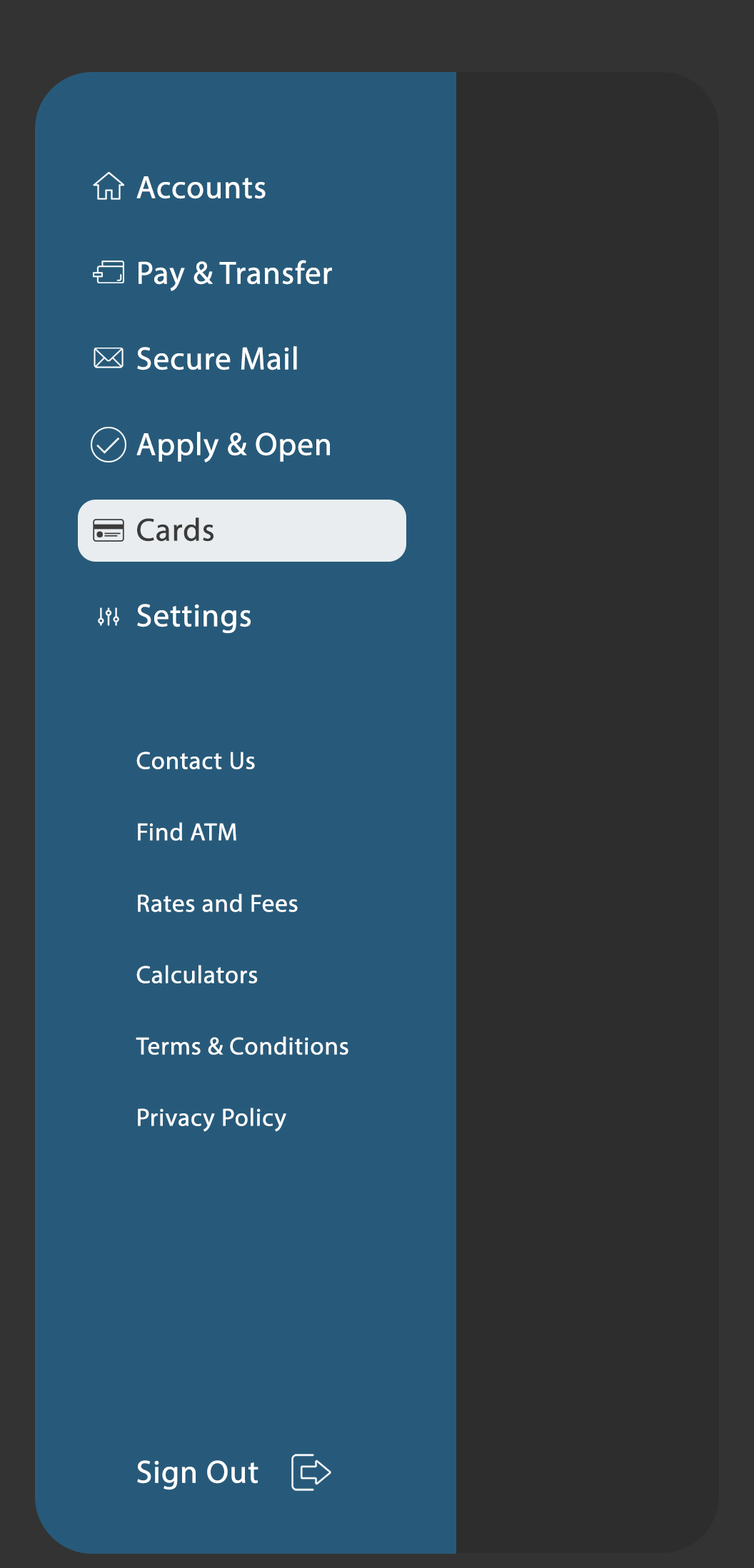
<style>
.page{position:relative;width:754px;height:1568px;background:#275a7a}
.page>*{position:absolute;margin:0}
.t1{font:25px/71.4px "MyriadPro-Regular";color:#ffffff;font-weight:bold}
.t2{font:32.1px/85.6px "MyriadPro-Regular";color:#ffffff;font-weight:bold}
.t3{font:32.1px/85.6px "MyriadPro-Regular";color:#3b3b3b;font-weight:bold}
.t4{font:32.1px/71.4px "MyriadPro-Regular";color:#ffffff;font-weight:bold}
</style>
<div class="page">
<p class="t1" style="left:136px;top:176px;width:212px;height:1314px"><span class="t2">Accounts<br>Pay &amp; Transfer<br>Secure Mail<br>Apply &amp; Open<br></span><span class="t3">Cards<br></span><span class="t2">Settings<br></span><br>Contact Us<br>Find ATM<br>Rates and Fees<br>Calculators<br>Terms &amp; Conditions<br>Privacy Policy<br><br><br><br><br><span class="t4">Sign Out</span></p>
</div>
